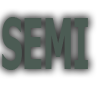
<style>
.page{position:relative;width:100px;height:100px;background:#ffffff}
.page>*{position:absolute;margin:0}
.t1{font:70.2px "Tahoma-Bold";color:#4c5c54;scale:0.48 1}
</style>
<div class="page">
<p class="t1" style="left:2px;top:17px;width:86px;height:53px">SEMI</p>
</div>
